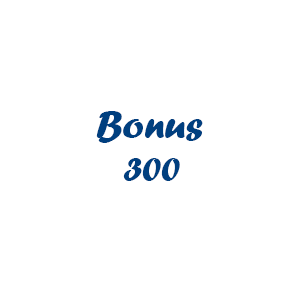
<style>
.page{position:relative;width:300px;height:300px;background:#ffffff}
.page>*{position:absolute;margin:0}
.t1{font:40px "ForteMT";color:#003f7f}
.t2{font:36px "ForteMT";color:#003f7f}
</style>
<div class="page">
<p class="t1" style="left:96px;top:111px;width:107px;height:32px">Bonus</p>
<p class="t2" style="left:123px;top:158px;width:57px;height:23px">300</p>
</div>
